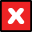
<style>
.page{position:relative;width:32px;height:32px;background:#ed2324}
.page>*{position:absolute;margin:0}
.t1{font:31.4px "ArialRoundedMT-ExtraBold";color:#ffffff;scale:1.09 1}
</style>
<div class="page">
<p class="t1" style="left:7px;top:8px;width:18px;height:16px">x</p>
</div>
